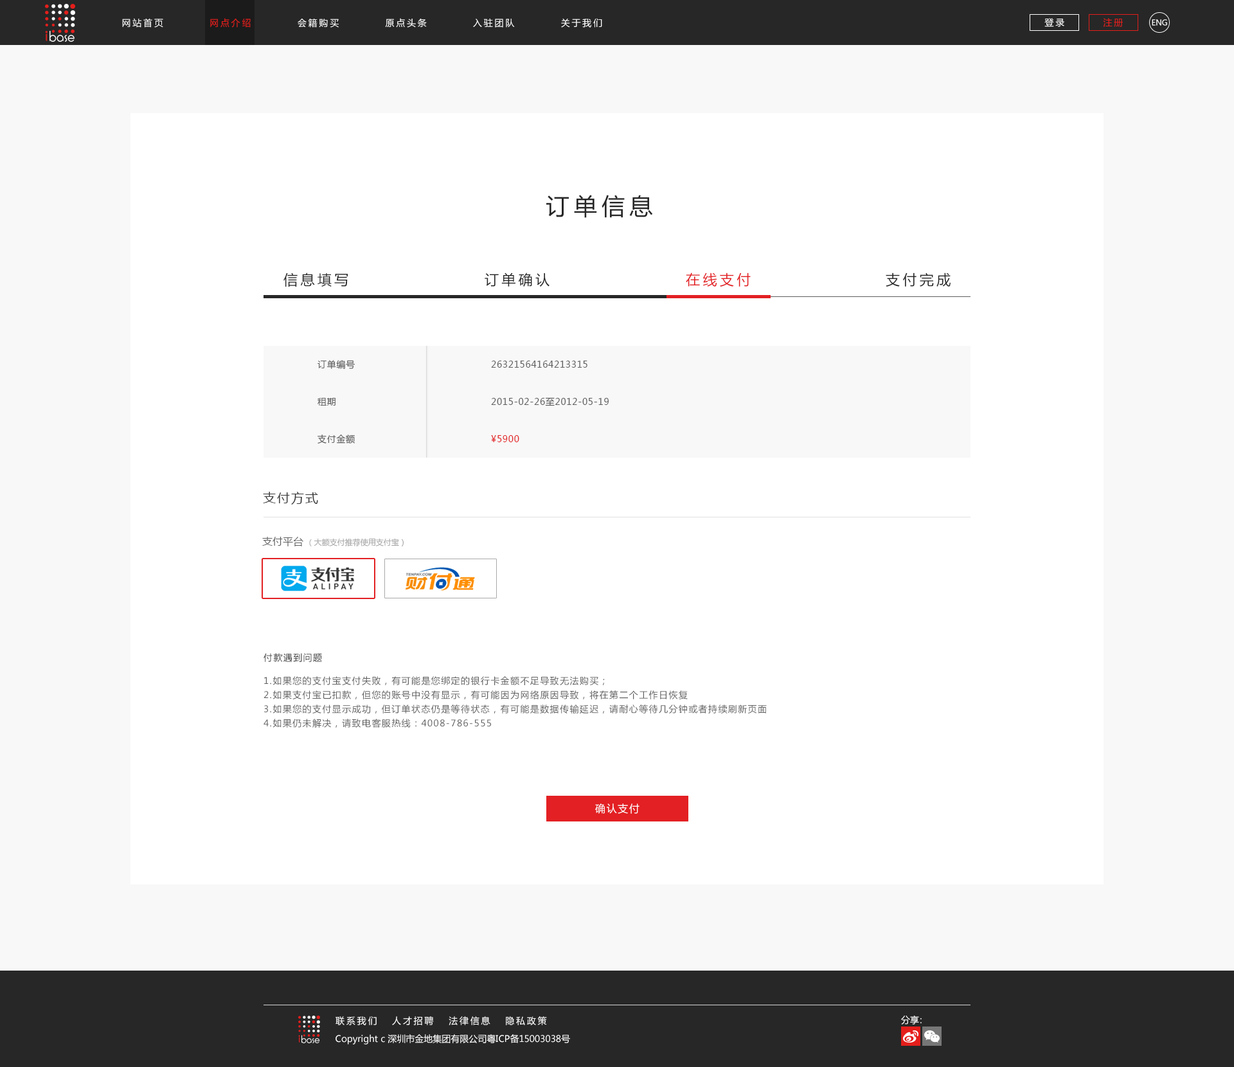
<style>
.page{position:relative;width:1234px;height:1067px;background:#ffffff}
.page>*{position:absolute;margin:0}
.t1{font:9px "MicrosoftYaHei";letter-spacing:0.2em;color:#ffffff}
.t2{font:9px "MicrosoftYaHei";letter-spacing:0.2em;color:#e41e1b}
.t3{font:7.7px "MicrosoftYaHei";letter-spacing:-0.01em;color:#ffffff}
.t4{font:23.1px "MicrosoftYaHei";letter-spacing:0.2em;color:#272727;text-transform:uppercase}
.t5{font:14.1px "MicrosoftYaHei";letter-spacing:0.2em;color:#272727;text-transform:uppercase}
.t6{font:14.1px "MicrosoftYaHei";letter-spacing:0.2em;color:#e32023;text-transform:uppercase}
.t7{font:9px "MicrosoftYaHei";letter-spacing:0.05em;color:#5e5e5e}
.t8{font:9px "MicrosoftYaHei";letter-spacing:0.05em;color:#e32023}
.t9{font:12.9px "MicrosoftYaHei";letter-spacing:0.1em;color:#373737;text-transform:uppercase}
.t10{font:7.7px "MicrosoftYaHei";color:#a9a9a9;text-transform:uppercase}
.t11{font:10.3px "MicrosoftYaHei";color:#5e5e5e;text-transform:uppercase}
.t12{font:9px/14.1px "MicrosoftYaHei";letter-spacing:0.1em;color:#5e5e5e;text-transform:uppercase}
.t13{font:9px/11.6px "MicrosoftYaHei";letter-spacing:0.1em;color:#373737;text-transform:uppercase}
.t14{font:10.3px "MicrosoftYaHei";letter-spacing:0.1em;color:#ffffff;text-transform:uppercase}
.t15{font:9px "MicrosoftYaHei";letter-spacing:-0.3em;color:#ffffff}
.t16{font:9px "MicrosoftYaHei";color:#ffffff}
</style>
<div class="page">
<p class="t1" style="left:122px;top:18px;width:480px;height:10px">网站首页          <span class="t2">网点介绍</span>          会籍购买          原点头条          入驻团队          关于我们</p>
<p class="t1" style="left:1045px;top:18px;width:20px;height:9px">登录</p>
<p class="t2" style="left:1103px;top:18px;width:20px;height:9px">注册</p>
<p class="t3" style="left:1152px;top:19px;width:15px;height:7px">ENG</p>
<p class="t4" style="left:546px;top:195px;width:107px;height:23px">订单信息</p>
<p class="t5" style="left:284px;top:273px;width:64px;height:14px">信息填写</p>
<p class="t5" style="left:485px;top:273px;width:65px;height:14px">订单确认</p>
<p class="t6" style="left:686px;top:273px;width:65px;height:14px">在线支付</p>
<p class="t5" style="left:886px;top:273px;width:65px;height:14px">支付完成</p>
<p class="t7" style="left:318px;top:360px;width:38px;height:9px">订单编号</p>
<p class="t7" style="left:491px;top:361px;width:97px;height:7px">26321564164213315</p>
<p class="t7" style="left:318px;top:398px;width:18px;height:8px">租期</p>
<p class="t7" style="left:491px;top:397px;width:118px;height:9px">2015-02-26至2012-05-19</p>
<p class="t7" style="left:318px;top:435px;width:37px;height:9px">支付金额</p>
<p class="t8" style="left:491px;top:435px;width:28px;height:7px">¥5900</p>
<p class="t9" style="left:263px;top:492px;width:55px;height:13px">支付方式</p>
<p class="t10" style="left:262px;top:537px;width:142px;height:9px"><span class="t11">支付平台 </span>（大额支付推荐使用支付宝）</p>
<p class="t12" style="left:264px;top:653px;width:503px;height:75px"><span class="t13">付款遇到问题<br><br></span>1.如果您的支付宝支付失败，有可能是您绑定的银行卡金额不足导致无法购买；<br>2.如果支付宝已扣款，但您的账号中没有显示，有可能因为网络原因导致，将在第二个工作日恢复<br>3.如果您的支付显示成功，但订单状态仍是等待状态，有可能是数据传输延迟，请耐心等待几分钟或者持续刷新页面<br>4.如果仍未解决，请致电客服热线：4008-786-555</p>
<p class="t14" style="left:595px;top:804px;width:45px;height:10px">确认支付</p>
<p class="t1" style="left:336px;top:1016px;width:211px;height:9px">联系我们   人才招聘   法律信息   隐私政策</p>
<p class="t15" style="left:901px;top:1016px;width:21px;height:9px"><span class="t16">分</span>享：</p>
<p class="t16" style="left:336px;top:1034px;width:234px;height:11px">Copyright c 深圳市金地集团有限公司粤ICP备15003038号</p>
</div>
